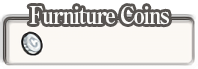
<style>
.page{position:relative;width:198px;height:69px;background:#fbf8f3}
.page>*{position:absolute;margin:0}
.t1{font:24px "RyuminPro-ExBold";letter-spacing:-0.08em;color:#fbfbf9;scale:0.9 1}
</style>
<div class="page">
<p class="t1" style="left:29px;top:6px;width:140px;height:19px">Furniture Coins</p>
</div>
